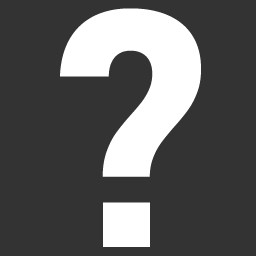
<style>
.page{position:relative;width:256px;height:256px;background:#333333}
.page>*{position:absolute;margin:0}
.t1{font:332.5px "Bahnschrift-Bold";color:#ffffff;font-weight:bold;scale:1.05 1}
</style>
<div class="page">
<p class="t1" style="left:60px;top:8px;width:141px;height:239px">?</p>
</div>
